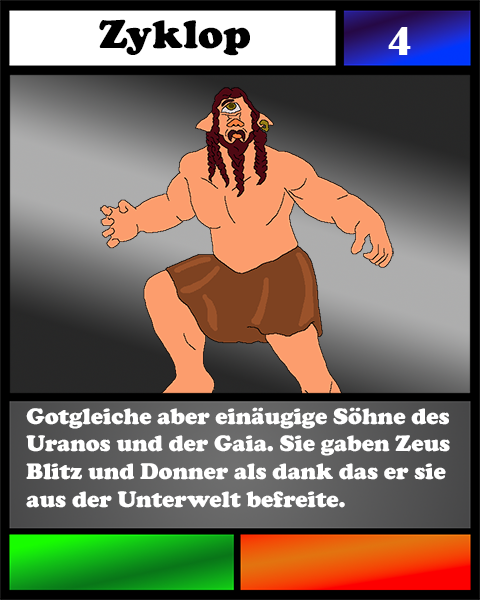
<style>
.page{position:relative;width:480px;height:600px}
.page>*{position:absolute;margin:0}
.t1{font:41.7px "CooperBlack";color:#000000}
.t2{font:41.7px "BritannicBold";color:#ffffff}
.t3{font:23.1px "CooperBlack";color:#ffffff}
</style>
<div class="page">
<p class="t1" style="left:99px;top:19px;width:151px;height:37px">Zyklop</p>
<p class="t2" style="left:388px;top:27px;width:23px;height:28px">4</p>
<p class="t3" style="left:26px;top:407px;width:424px;height:101px">Gotgleiche aber einäugige Söhne des Uranos und der Gaia. Sie gaben Zeus <br>Blitz und Donner als dank das er sie <br>aus der Unterwelt befreite.</p>
</div>
